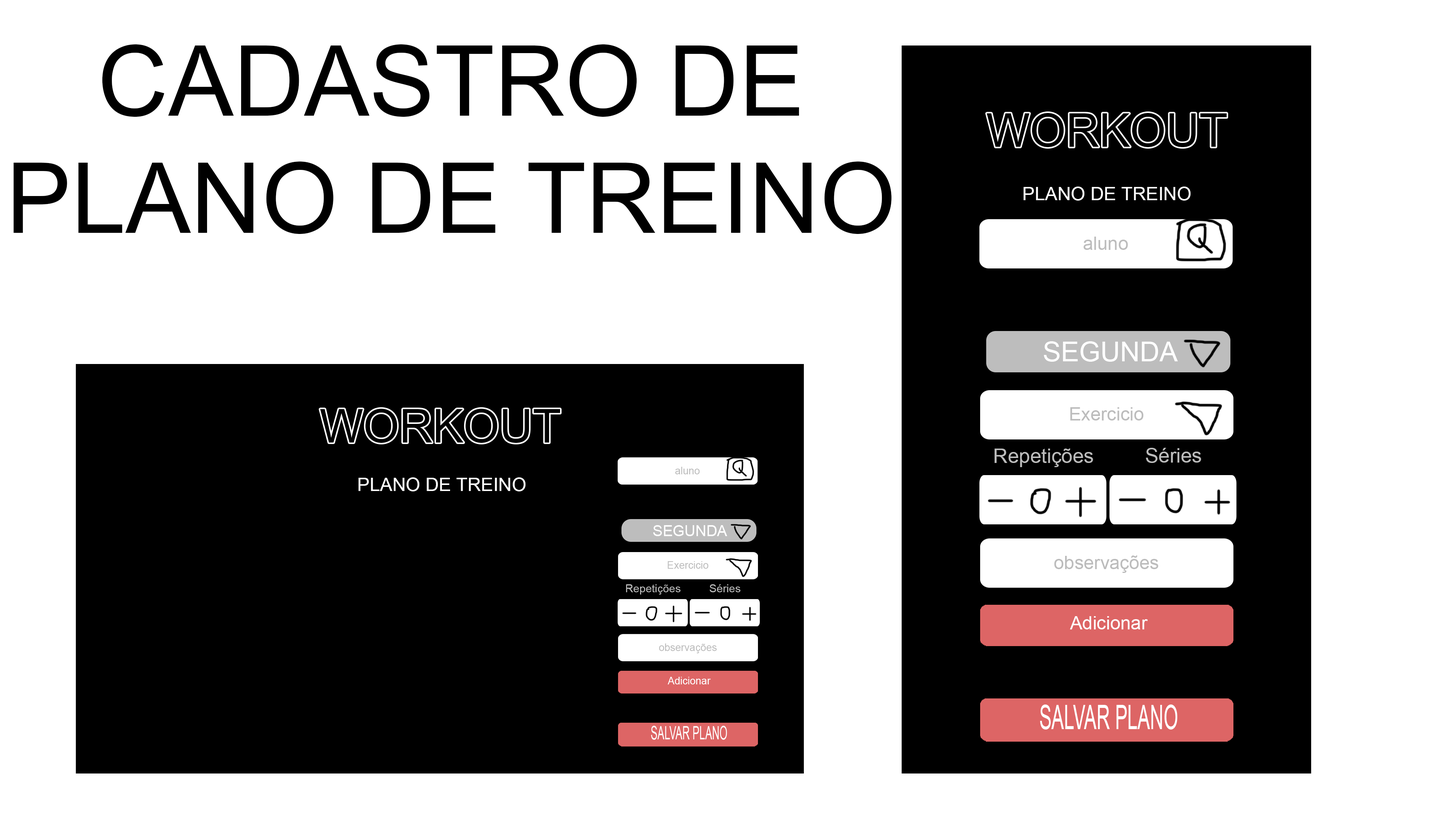
<style>
.page{position:relative;width:1456px;height:819px;background:#ffffff}
.page>*{position:absolute;margin:0}
.t1{font:97.8px "ArialMT";color:#000000}
.t2{font:18.6px "ArialMT";color:#ffffff}
.t3{font:18.6px "ArialMT";color:#bcbcbc}
.t4{font:27.3px "ArialMT";color:#ffffff}
.t5{font:20.1px "ArialMT";color:#bcbcbc}
.t6{font:10.3px "ArialMT";color:#bcbcbc}
.t7{font:15.1px "ArialMT";color:#ffffff}
.t8{font:11.1px "ArialMT";color:#bcbcbc}
.t9{font:10.3px "ArialMT";color:#ffffff}
.t10{font:33.6px "ArialMT";color:#ffffff;scale:0.55 1}
.t11{font:18.6px "ArialMT";color:#ffffff;scale:0.55 1}
</style>
<div class="page">
<p class="t1" style="left:13px;top:44px;width:879px;height:190px;text-align:center">CADASTRO DE PLANO DE TREINO</p>
<p class="t2" style="left:1023px;top:187px;width:168px;height:14px">PLANO DE TREINO</p>
<p class="t3" style="left:1083px;top:237px;width:45px;height:13px">aluno</p>
<p class="t4" style="left:1044px;top:341px;width:134px;height:21px">SEGUNDA</p>
<p class="t3" style="left:1070px;top:407px;width:74px;height:13px">Exercicio</p>
<p class="t5" style="left:995px;top:449px;width:98px;height:18px">Repetições</p>
<p class="t5" style="left:1146px;top:448px;width:55px;height:15px">Séries</p>
<p class="t6" style="left:675px;top:467px;width:25px;height:7px">aluno</p>
<p class="t2" style="left:358px;top:477px;width:168px;height:14px">PLANO DE TREINO</p>
<p class="t7" style="left:653px;top:525px;width:74px;height:11px">SEGUNDA</p>
<p class="t3" style="left:1054px;top:555px;width:104px;height:18px">observações</p>
<p class="t6" style="left:668px;top:561px;width:40px;height:8px">Exercicio</p>
<p class="t8" style="left:626px;top:584px;width:55px;height:11px">Repetições</p>
<p class="t8" style="left:709px;top:584px;width:32px;height:8px">Séries</p>
<p class="t2" style="left:1070px;top:616px;width:78px;height:13px">Adicionar</p>
<p class="t6" style="left:659px;top:643px;width:58px;height:10px">observações</p>
<p class="t9" style="left:668px;top:677px;width:43px;height:7px">Adicionar</p>
<p class="t10" style="left:1040px;top:704px;width:137px;height:26px">SALVAR PLANO</p>
<p class="t11" style="left:651px;top:726px;width:76px;height:14px">SALVAR PLANO</p>
</div>
